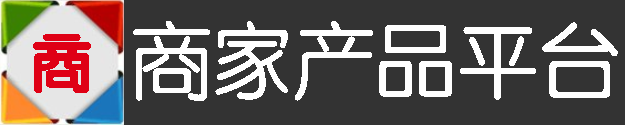
<style>
.page{position:relative;width:625px;height:125px;background:#333333}
.page>*{position:absolute;margin:0}
.t1{font:83.3px "FZY3JW--GB1-0";color:#ffffff}
</style>
<div class="page">
<p class="t1" style="left:133px;top:21px;width:485px;height:80px">商家产品平台</p>
<p class="t1" style="left:133px;top:21px;width:485px;height:80px">商家产品平台</p>
<p class="t1" style="left:133px;top:21px;width:485px;height:80px">商家产品平台</p>
</div>
